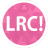
<style>
.page{position:relative;width:48px;height:48px;background:#ffffff}
.page>*{position:absolute;margin:0}
.t1{font:19px "AdobeGothicStd-Bold";color:#ffffff}
</style>
<div class="page">
<p class="t1" style="left:6px;top:16px;width:37px;height:15px">LRC!</p>
</div>
